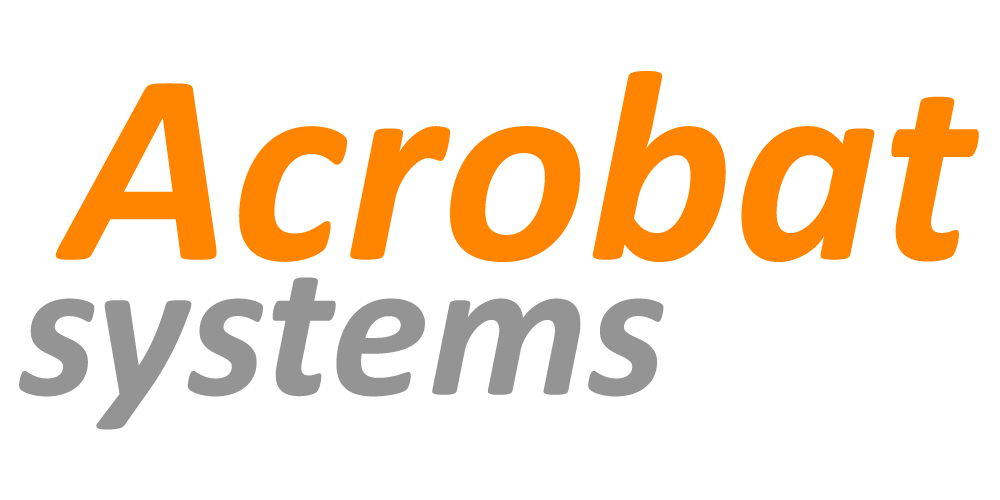
<style>
.page{position:relative;width:1000px;height:500px;background:#ffffff}
.page>*{position:absolute;margin:0}
.t1{font:276.2px "Calibri-BoldItalic";color:#ff8400}
.t2{font:198.8px "Calibri-BoldItalic";color:#949494}
</style>
<div class="page">
<p class="t1" style="left:55px;top:71px;width:924px;height:191px">Acrobat</p>
<p class="t2" style="left:19px;top:277px;width:645px;height:153px">systems</p>
</div>
